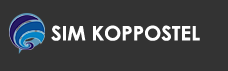
<style>
.page{position:relative;width:228px;height:71px;background:#333333}
.page>*{position:absolute;margin:0}
.t1{font:20px "CenturyGothic-Bold";color:#ffffff}
</style>
<div class="page">
<p class="t1" style="left:51px;top:25px;width:149px;height:16px">SIM KOPPOSTEL</p>
</div>
